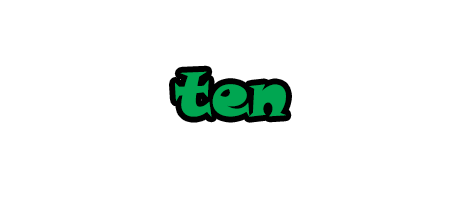
<style>
.page{position:relative;width:462px;height:199px;background:#ffffff}
.page>*{position:absolute;margin:0}
.t1{font:60px "SnapITC-Regular";color:#00a651}
</style>
<div class="page">
<p class="t1" style="left:175px;top:71px;width:111px;height:46px">ten</p>
</div>
